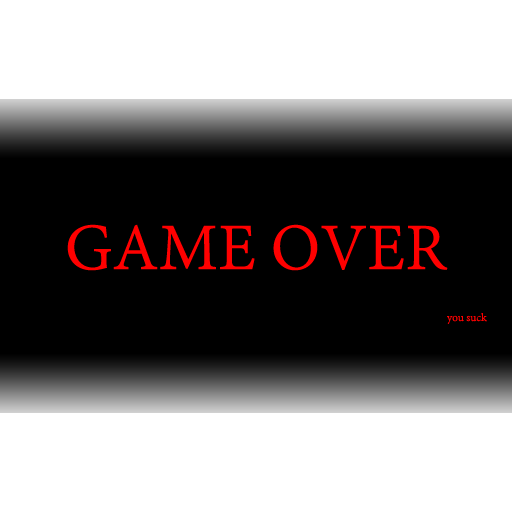
<style>
.page{position:relative;width:512px;height:512px;background:#ffffff}
.page>*{position:absolute;margin:0}
.t1{font:71.9px "AdobeDevanagari-Regular";color:#ff0000}
.t2{font:12px "AdobeDevanagari-Regular";color:#ff0000}
</style>
<div class="page">
<p class="t1" style="left:67px;top:224px;width:381px;height:47px">GAME OVER</p>
<p class="t2" style="left:447px;top:313px;width:40px;height:11px">you suck</p>
</div>
